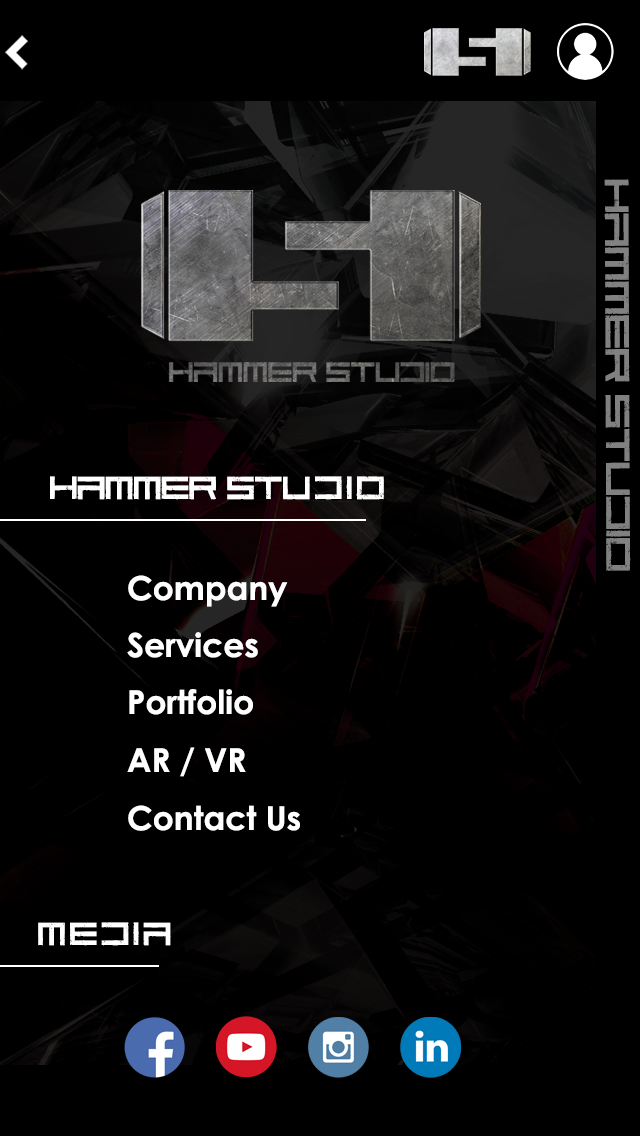
<style>
.page{position:relative;width:640px;height:1136px;background:#000000}
.page>*{position:absolute;margin:0}
.t1{font:42px "CodePredators-Regular";color:#818181;scale:1.16 1}
.t2{font:40px "CodePredators-Regular";color:#ffffff}
.t3{font:40px "CodePredators-Regular";letter-spacing:0.1em;color:#ffffff}
.t4{font:33px "CenturyGothic-Bold";color:#ffffff}
</style>
<div class="page">
<p class="t1" style="left:604px;top:179px;width:27px;height:392px;rotate:90deg">Hammer Studio</p>
<p class="t2" style="left:50px;top:476px;width:334px;height:24px">Hammer St<span class="t3">udi</span>o</p>
<p class="t4" style="left:128px;top:575px;width:160px;height:32px">Company</p>
<p class="t4" style="left:127px;top:632px;width:131px;height:26px">Services</p>
<p class="t4" style="left:129px;top:689px;width:124px;height:26px">Portfolio</p>
<p class="t4" style="left:127px;top:747px;width:119px;height:30px">AR / VR</p>
<p class="t4" style="left:128px;top:805px;width:172px;height:26px">Contact Us</p>
<p class="t3" style="left:38px;top:922px;width:133px;height:24px">media</p>
</div>
